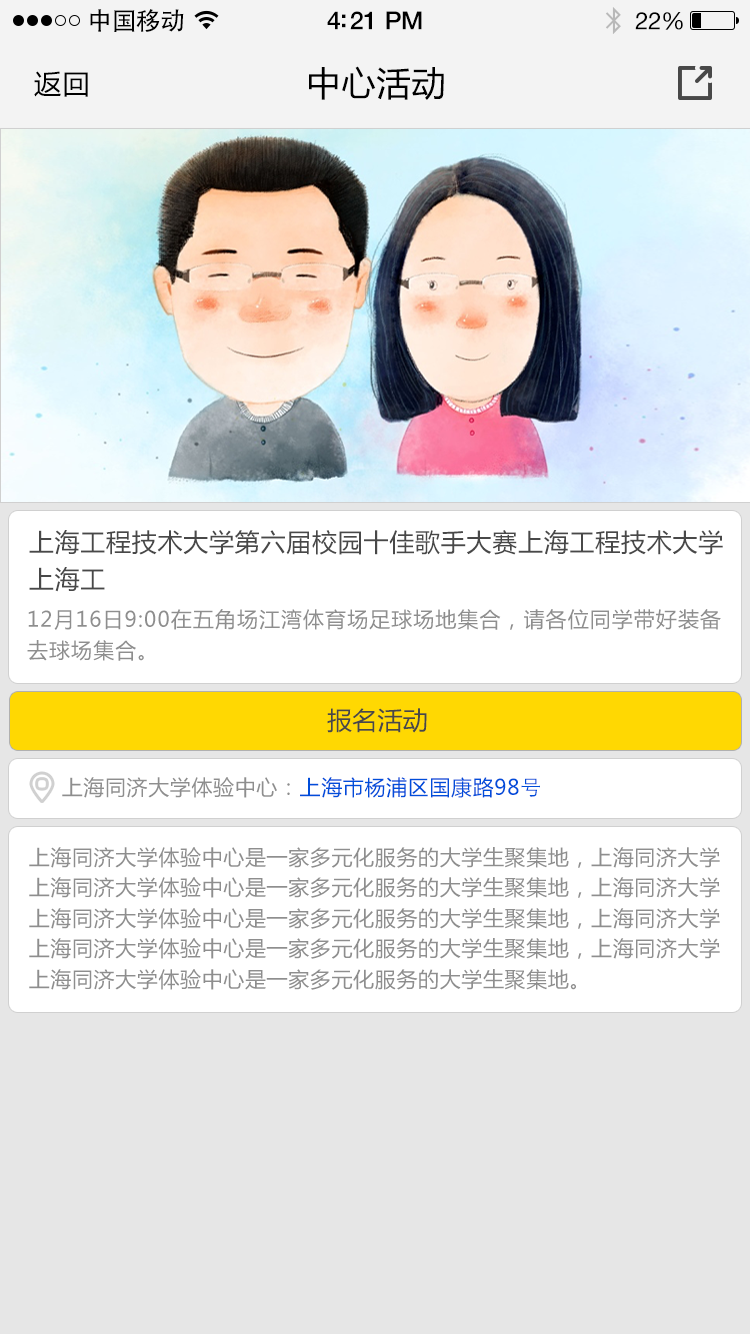
<style>
.page{position:relative;width:750px;height:1334px;background:#e6e6e6}
.page>*{position:absolute;margin:0}
.t1{font:25px "AdobeHeitiStd-Regular";letter-spacing:-0.025em;color:#000000}
.t2{font:25px "HelveticaNeue-Medium";letter-spacing:-0.02em;color:#000000}
.t3{font:24px "HelveticaNeue";letter-spacing:-0.02em;color:#000000}
.t4{font:27px "MicrosoftYaHei";letter-spacing:0.05em;color:#000000}
.t5{font:34px "MicrosoftYaHei";letter-spacing:0.03em;color:#000000}
.t6{font:25px "MicrosoftYaHei";letter-spacing:0.03em;color:#555555}
.t7{font:21px "MicrosoftYaHei";letter-spacing:0.05em;color:#8e8e8e}
.t8{font:25px "MicrosoftYaHei";letter-spacing:0.01em;color:#555555}
.t9{font:21px "MicrosoftYaHei";letter-spacing:0.03em;color:#8e8e8e}
.t10{font:21px "MicrosoftYaHei";letter-spacing:0.03em;color:#004dda}
.t11{font:21px "STHeitiSC-Light";letter-spacing:0.03em;color:#004dda}
</style>
<div class="page">
<p class="t1" style="left:90px;top:9px;width:94px;height:23px">中国移动</p>
<p class="t2" style="left:327px;top:11px;width:95px;height:19px">4:21 PM</p>
<p class="t3" style="left:635px;top:12px;width:48px;height:18px">22%</p>
<p class="t4" style="left:34px;top:71px;width:54px;height:26px">返回</p>
<p class="t5" style="left:309px;top:66px;width:135px;height:34px">中心活动</p>
<p class="t6" style="left:29px;top:530px;width:694px;height:25px">上海工程技术大学第六届校园十佳歌手大赛上海工程技术大学</p>
<p class="t6" style="left:29px;top:567px;width:76px;height:25px">上海工</p>
<p class="t7" style="left:28px;top:609px;width:693px;height:21px">12月16日9:00在五角场江湾体育场足球场地集合，请各位同学带好装备</p>
<p class="t7" style="left:27px;top:640px;width:117px;height:21px">去球场集合。</p>
<p class="t8" style="left:327px;top:708px;width:100px;height:25px">报名活动</p>
<p class="t9" style="left:62px;top:777px;width:478px;height:21px">上海同济大学体验中心：<span class="t10">上海市杨浦区国康路98</span><span class="t11">号</span></p>
<p class="t9" style="left:29px;top:847px;width:691px;height:21px">上海同济大学体验中心是一家多元化服务的大学生聚集地，上海同济大学</p>
<p class="t9" style="left:29px;top:877px;width:691px;height:21px">上海同济大学体验中心是一家多元化服务的大学生聚集地，上海同济大学</p>
<p class="t9" style="left:29px;top:908px;width:691px;height:21px">上海同济大学体验中心是一家多元化服务的大学生聚集地，上海同济大学</p>
<p class="t9" style="left:29px;top:938px;width:691px;height:21px">上海同济大学体验中心是一家多元化服务的大学生聚集地，上海同济大学</p>
<p class="t9" style="left:29px;top:969px;width:547px;height:21px">上海同济大学体验中心是一家多元化服务的大学生聚集地。</p>
</div>
